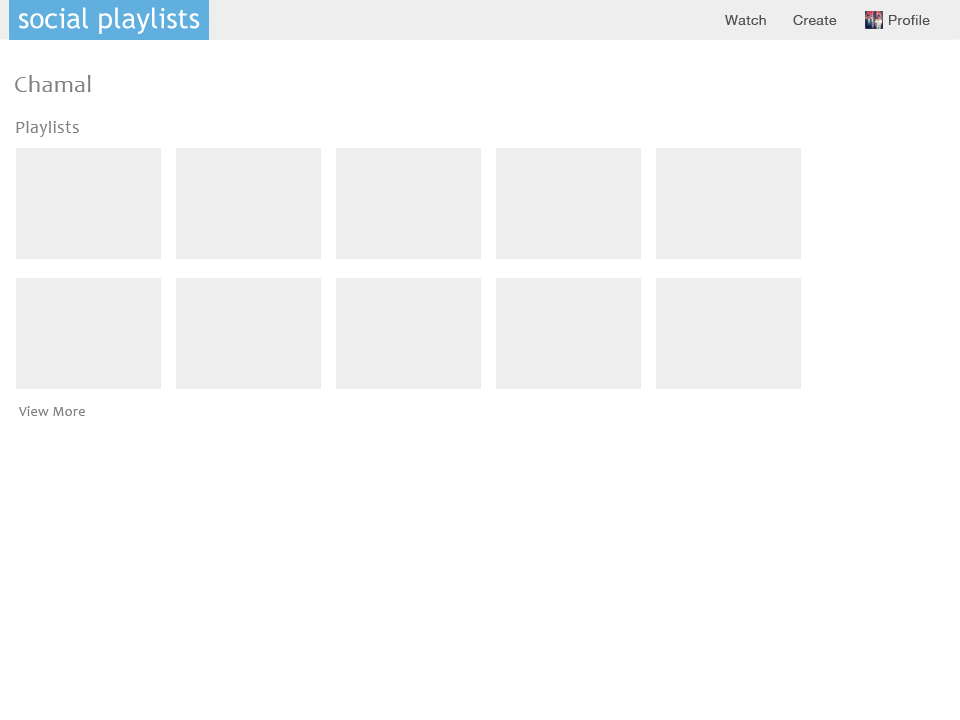
<style>
.page{position:relative;width:960px;height:720px;background:#ffffff}
.page>*{position:absolute;margin:0}
.t1{font:14px "HelveticaNeue";letter-spacing:0.025em;color:#515151}
.t2{font:24px "Candara";letter-spacing:0.025em;color:#818181}
.t3{font:18px "Candara";letter-spacing:0.025em;color:#818181}
.t4{font:14px "Candara";letter-spacing:0.025em;color:#818181}
</style>
<div class="page">
<p class="t1" style="left:725px;top:15px;width:41px;height:10px">Watch</p>
<p class="t1" style="left:793px;top:15px;width:44px;height:10px">Create</p>
<p class="t1" style="left:889px;top:15px;width:41px;height:10px">Profile</p>
<p class="t2" style="left:15px;top:75px;width:76px;height:17px">Chamal</p>
<p class="t3" style="left:16px;top:121px;width:63px;height:16px">Playlists</p>
<p class="t4" style="left:19px;top:406px;width:66px;height:10px">View More</p>
</div>
